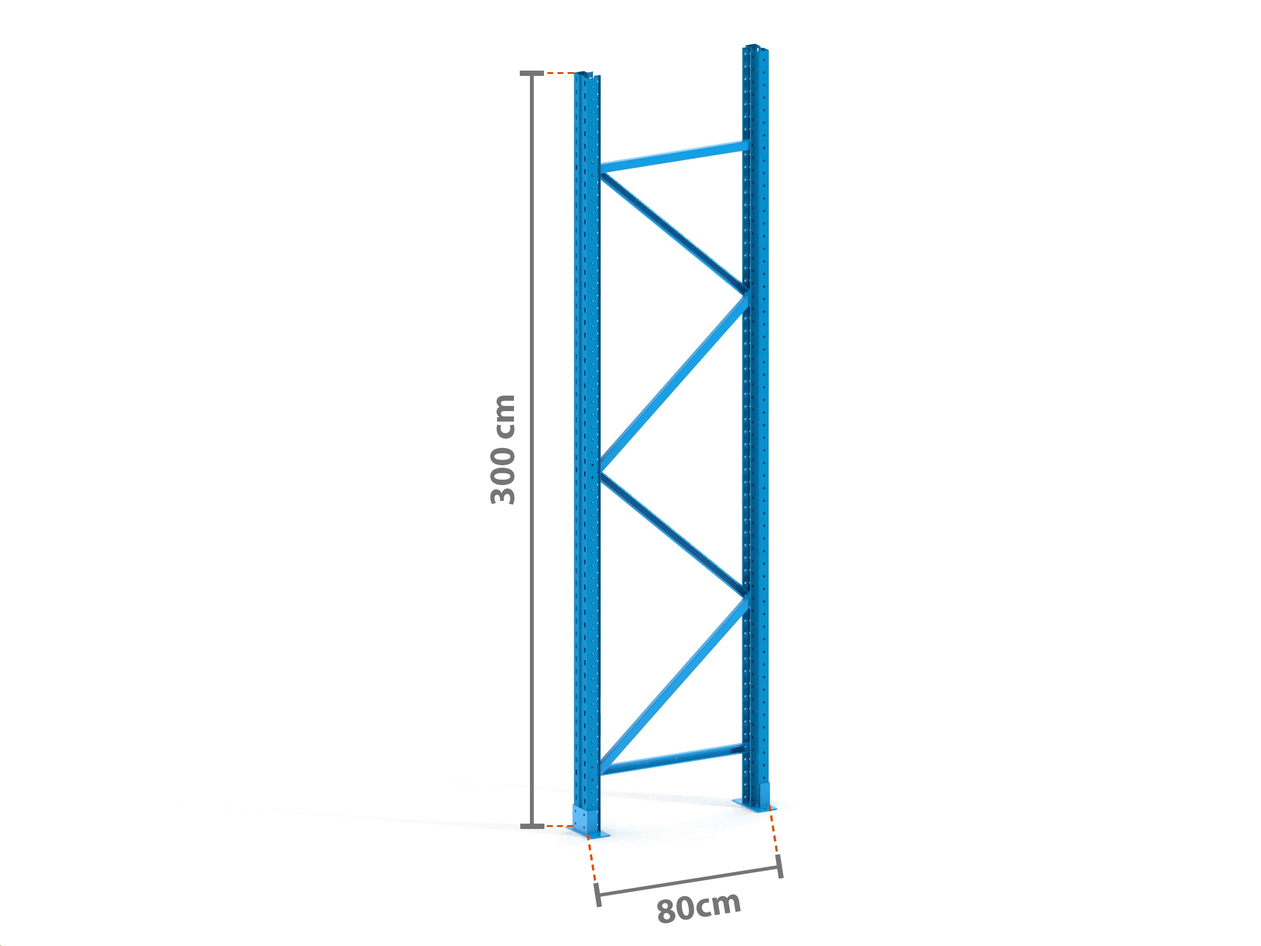
<style>
.page{position:relative;width:1261px;height:946px;background:#ffffff}
.page>*{position:absolute;margin:0}
.t1{font:35.5px "MyriadPro-Bold";color:#757575}
</style>
<div class="page">
<p class="t1" style="left:490px;top:395px;width:24px;height:110px;rotate:-90deg">300 cm</p>
<p class="t1" style="left:657px;top:894px;width:84px;height:29px;rotate:-9deg">80cm</p>
</div>
